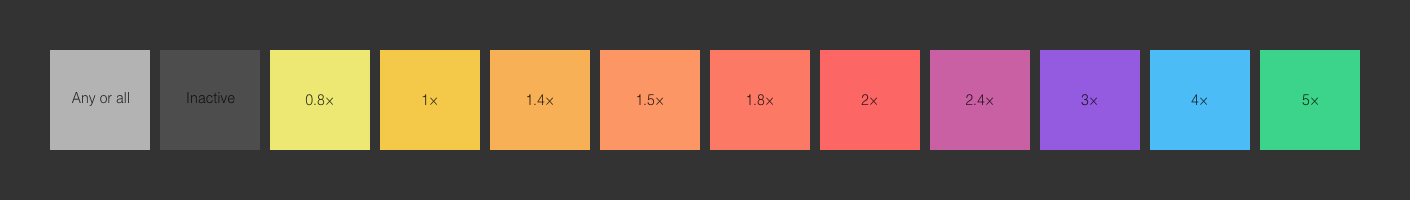
<style>
.page{position:relative;width:1410px;height:200px;background:#333333}
.page>*{position:absolute;margin:0}
.t1{font:14px "Helvetica-Light";color:#242424}
.t2{font:14px "Helvetica-Light";color:#000000}
.t3{font:14px "Helvetica-Light"}
.t4{font:14px "Helvetica-Light";color:#31280f}
.t5{font:14px "Helvetica-Light";color:#322311}
.t6{font:14px "Helvetica-Light";color:#321e14}
.t7{font:14px "Helvetica-Light";color:#321814}
.t8{font:14px "Helvetica-Light";color:#1e122d}
.t9{font:14px "Helvetica-Light";color:#0c2a1c}
</style>
<div class="page">
<p class="t1" style="left:72px;top:92px;width:57px;height:14px">Any or all</p>
<p class="t2" style="left:187px;top:92px;width:48px;height:12px">Inactive</p>
<p class="t3" style="left:305px;top:94px;width:28px;height:12px">0.8×</p>
<p class="t4" style="left:422px;top:94px;width:15px;height:11px">1×</p>
<p class="t5" style="left:527px;top:94px;width:26px;height:11px">1.4×</p>
<p class="t6" style="left:637px;top:94px;width:26px;height:12px">1.5×</p>
<p class="t7" style="left:747px;top:94px;width:26px;height:12px">1.8×</p>
<p class="t3" style="left:861px;top:94px;width:16px;height:11px">2×</p>
<p class="t3" style="left:966px;top:94px;width:27px;height:11px">2.4×</p>
<p class="t8" style="left:1081px;top:94px;width:16px;height:12px">3×</p>
<p class="t3" style="left:1191px;top:94px;width:16px;height:11px">4×</p>
<p class="t9" style="left:1302px;top:94px;width:16px;height:12px">5×</p>
</div>
